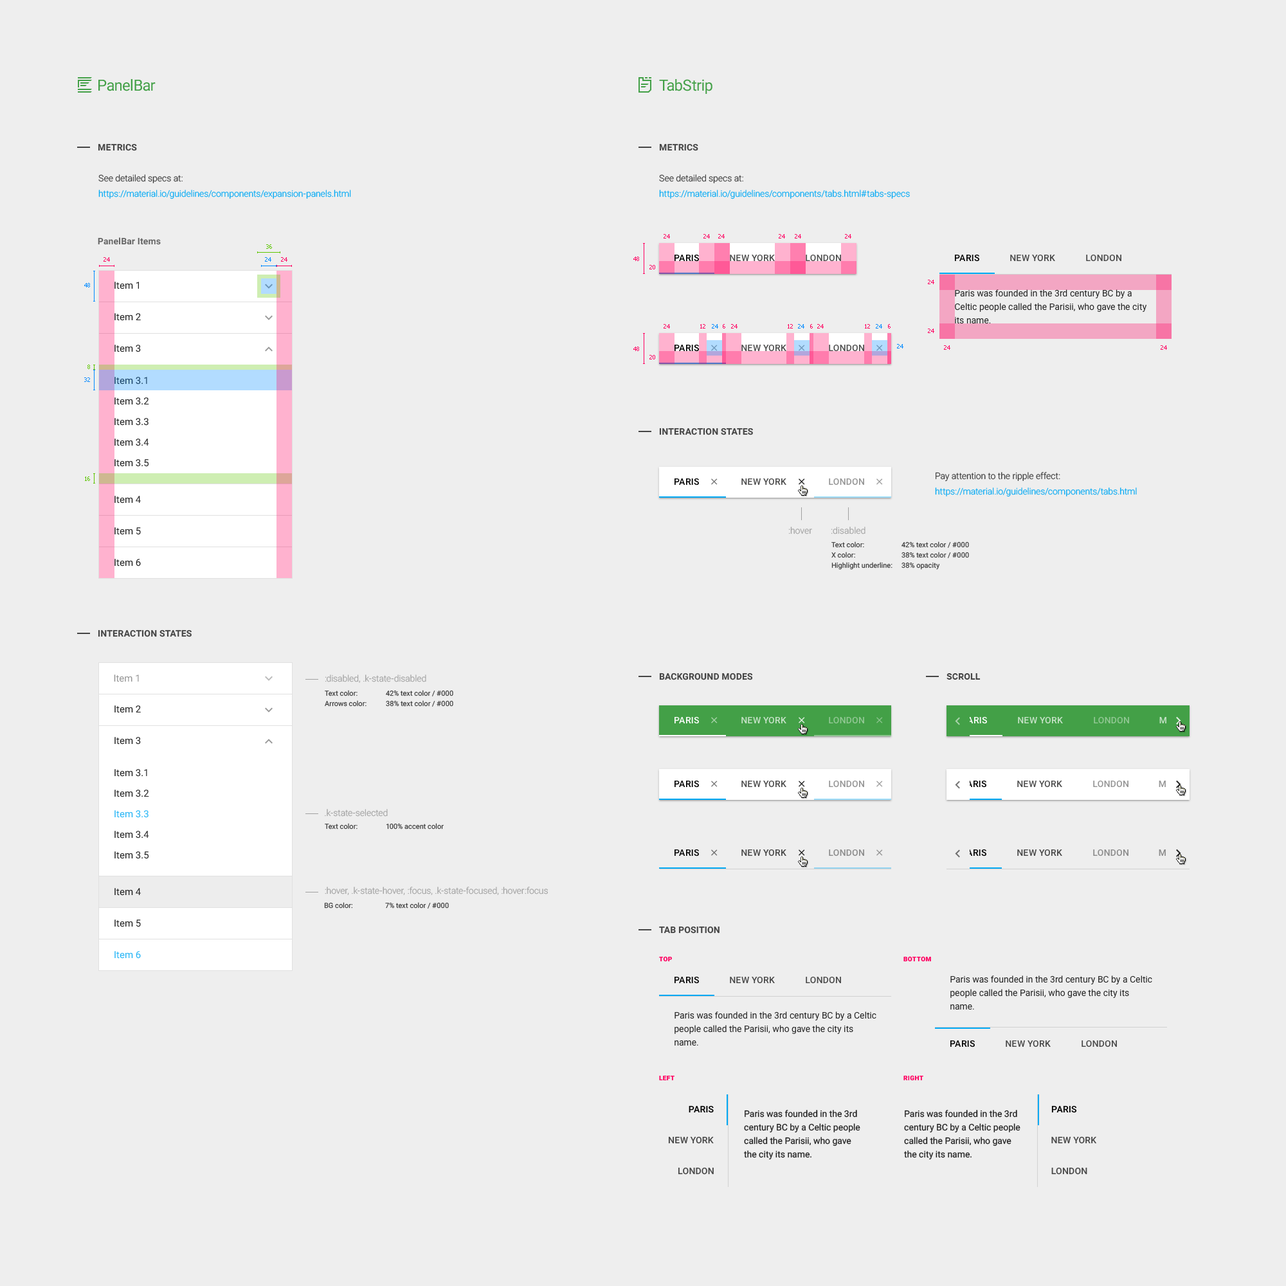
<style>
.page{position:relative;width:1286px;height:1286px;background:#eeeeee}
.page>*{position:absolute;margin:0}
.t1{font:15.4px "Roboto-Regular";letter-spacing:-0.025em;color:#43a047}
.t2{font:9px "Roboto-Bold";letter-spacing:0.01em;color:#454545;text-transform:uppercase}
.t3{font:9px/15.4px "Roboto-Light";color:#03a9f4}
.t4{font:9px/15.4px "Roboto-Light";color:#383838}
.t5{font:9px "Roboto-Bold";letter-spacing:0.01em;color:#656565}
.t6{font:5.8px "Tahoma";color:#5ec600}
.t7{font:5.8px "Tahoma";color:#ff0060}
.t8{font:5.8px "Tahoma";color:#008aff}
.t9{font:9px "Roboto-Medium";letter-spacing:0.01em;color:#000000}
.t10{font:9px "Roboto-Medium";letter-spacing:0.01em;color:#4c4c4c}
.t11{font:9px "Roboto-Medium";letter-spacing:0.01em;color:#474747}
.t12{font:9.6px/31.5px "Roboto-Regular";color:#212121}
.t13{font:9px/13.5px "Roboto-Regular";color:#1f1f1f}
.t14{font:9.6px/20.6px "Roboto-Regular";color:#212121}
.t15{font:9px "Roboto-Medium";letter-spacing:0.01em;color:#949494}
.t16{font:9px "Roboto-Light";color:#a1a1a1}
.t17{font:7.1px/10.3px "Roboto-Regular";color:#383838}
.t18{font:7.1px/46.3px "Roboto-Regular";color:#383838}
.t19{font:9.6px "Roboto-Regular";color:#949494}
.t20{font:9px "Roboto-Medium";letter-spacing:0.01em;color:#ffffff}
.t21{font:9px "Roboto-Medium";letter-spacing:0.01em;color:#c7e3c8}
.t22{font:9px "Roboto-Medium";letter-spacing:0.01em;color:#92c894}
.t23{font:7.1px "Roboto-Regular";color:#383838}
.t24{font:9px "Roboto-Medium";letter-spacing:0.01em;color:#8a8a8a}
.t25{font:9.6px/31.5px "Roboto-Regular"}
.t26{font:6.4px "Roboto-Black";letter-spacing:0.025em;color:#ff0060;text-transform:uppercase}
</style>
<div class="page">
<p class="t1" style="left:98px;top:79px;width:58px;height:12px">PanelBar</p>
<p class="t1" style="left:659px;top:79px;width:53px;height:15px">TabStrip</p>
<p class="t2" style="left:98px;top:143px;width:39px;height:8px">Metrics</p>
<p class="t2" style="left:659px;top:143px;width:39px;height:8px">Metrics</p>
<p class="t3" style="left:98px;top:174px;width:253px;height:25px"><span class="t4">See detailed specs at:<br></span>https://material.io/guidelines/components/expansion-panels.html</p>
<p class="t3" style="left:659px;top:174px;width:251px;height:25px"><span class="t4">See detailed specs at:<br></span>https://material.io/guidelines/components/tabs.html#tabs-specs</p>
<p class="t5" style="left:98px;top:237px;width:63px;height:8px">PanelBar Items</p>
<p class="t6" style="left:266px;top:244px;width:6px;height:5px">36</p>
<p class="t7" style="left:663px;top:234px;width:7px;height:5px">24</p>
<p class="t7" style="left:703px;top:234px;width:7px;height:5px">24</p>
<p class="t7" style="left:718px;top:234px;width:6px;height:5px">24</p>
<p class="t7" style="left:779px;top:234px;width:6px;height:5px">24</p>
<p class="t7" style="left:795px;top:234px;width:6px;height:5px">24</p>
<p class="t7" style="left:845px;top:234px;width:6px;height:5px">24</p>
<p class="t7" style="left:104px;top:257px;width:6px;height:5px">24</p>
<p class="t8" style="left:265px;top:257px;width:6px;height:5px">24</p>
<p class="t7" style="left:281px;top:257px;width:6px;height:5px">24</p>
<p class="t7" style="left:633px;top:256px;width:6px;height:5px">48</p>
<p class="t9" style="left:674px;top:254px;width:25px;height:8px">PARIS</p>
<p class="t10" style="left:730px;top:255px;width:45px;height:7px">NEW YORK</p>
<p class="t10" style="left:806px;top:254px;width:35px;height:8px">LONDON</p>
<p class="t9" style="left:955px;top:254px;width:24px;height:8px">PARIS</p>
<p class="t11" style="left:1010px;top:255px;width:45px;height:7px">NEW YORK</p>
<p class="t11" style="left:1086px;top:254px;width:35px;height:8px">LONDON</p>
<p class="t7" style="left:649px;top:265px;width:6px;height:4px">20</p>
<p class="t12" style="left:114px;top:282px;width:27px;height:70px">Item 1<br>Item 2<br>Item 3</p>
<p class="t7" style="left:928px;top:280px;width:6px;height:4px">24</p>
<p class="t8" style="left:84px;top:283px;width:6px;height:4px">48</p>
<p class="t13" style="left:955px;top:289px;width:191px;height:35px">Paris was founded in the 3rd century BC by a Celtic people called the Parisii, who gave the city its name.</p>
<p class="t7" style="left:663px;top:324px;width:7px;height:4px">24</p>
<p class="t7" style="left:700px;top:324px;width:5px;height:4px">12</p>
<p class="t8" style="left:712px;top:324px;width:6px;height:4px">24</p>
<p class="t7" style="left:723px;top:324px;width:2px;height:4px">6</p>
<p class="t7" style="left:731px;top:324px;width:6px;height:4px">24</p>
<p class="t7" style="left:788px;top:324px;width:5px;height:4px">12</p>
<p class="t8" style="left:798px;top:324px;width:6px;height:4px">24</p>
<p class="t7" style="left:810px;top:324px;width:3px;height:4px">6</p>
<p class="t7" style="left:817px;top:324px;width:7px;height:4px">24</p>
<p class="t7" style="left:865px;top:324px;width:5px;height:4px">12</p>
<p class="t8" style="left:876px;top:324px;width:6px;height:4px">24</p>
<p class="t7" style="left:888px;top:324px;width:2px;height:4px">6</p>
<p class="t7" style="left:928px;top:328px;width:6px;height:5px">24</p>
<p class="t7" style="left:633px;top:346px;width:6px;height:5px">48</p>
<p class="t9" style="left:674px;top:344px;width:25px;height:8px">PARIS</p>
<p class="t10" style="left:741px;top:345px;width:45px;height:7px">NEW YORK</p>
<p class="t10" style="left:829px;top:344px;width:35px;height:8px">LONDON</p>
<p class="t8" style="left:897px;top:344px;width:6px;height:4px">24</p>
<p class="t7" style="left:944px;top:345px;width:6px;height:5px">24</p>
<p class="t7" style="left:1160px;top:345px;width:7px;height:5px">24</p>
<p class="t6" style="left:87px;top:364px;width:3px;height:5px">8</p>
<p class="t7" style="left:649px;top:355px;width:6px;height:4px">20</p>
<p class="t8" style="left:84px;top:377px;width:6px;height:5px">32</p>
<p class="t14" style="left:114px;top:377px;width:35px;height:90px">Item 3.1<br>Item 3.2<br>Item 3.3<br>Item 3.4<br>Item 3.5</p>
<p class="t2" style="left:659px;top:428px;width:94px;height:7px">Interaction States</p>
<p class="t3" style="left:935px;top:472px;width:202px;height:25px"><span class="t4">Pay attention to the ripple effect:<br></span>https://material.io/guidelines/components/tabs.html</p>
<p class="t6" style="left:85px;top:476px;width:5px;height:5px">16</p>
<p class="t9" style="left:674px;top:478px;width:25px;height:7px">PARIS</p>
<p class="t10" style="left:741px;top:478px;width:45px;height:7px">NEW YORK</p>
<p class="t15" style="left:829px;top:478px;width:35px;height:7px">LONDON</p>
<p class="t12" style="left:114px;top:496px;width:27px;height:70px">Item 4<br>Item 5<br>Item 6</p>
<p class="t16" style="left:788px;top:526px;width:24px;height:8px">:hover</p>
<p class="t16" style="left:831px;top:526px;width:34px;height:8px">:disabled</p>
<p class="t17" style="left:831px;top:541px;width:61px;height:29px"><span class="t18">Text color:</span><br>X color:<br>Highlight underline:</p>
<p class="t17" style="left:901px;top:541px;width:68px;height:29px"><span class="t18">42% text color / #000<br></span>38% text color / #000<br>38% opacity</p>
<p class="t2" style="left:98px;top:629px;width:94px;height:8px">Interaction States</p>
<p class="t19" style="left:114px;top:674px;width:25px;height:8px">Item 1</p>
<p class="t16" style="left:325px;top:674px;width:101px;height:9px">:disabled, .k-state-disabled</p>
<p class="t2" style="left:659px;top:672px;width:94px;height:8px">Background Modes</p>
<p class="t2" style="left:946px;top:673px;width:34px;height:7px">Scroll</p>
<p class="t17" style="left:325px;top:690px;width:41px;height:16px"><span class="t18">Text color:</span><br>Arrows color:</p>
<p class="t18" style="left:386px;top:690px;width:67px;height:16px">42% text color / #000<br><span class="t17">38% text color / #000</span></p>
<p class="t12" style="left:114px;top:705px;width:27px;height:39px">Item 2<br>Item 3</p>
<p class="t20" style="left:674px;top:716px;width:25px;height:8px">PARIS</p>
<p class="t21" style="left:741px;top:717px;width:45px;height:7px">NEW YORK</p>
<p class="t22" style="left:829px;top:716px;width:35px;height:8px">LONDON</p>
<p class="t20" style="left:962px;top:716px;width:25px;height:8px">PARIS</p>
<p class="t21" style="left:1018px;top:717px;width:45px;height:7px">NEW YORK</p>
<p class="t22" style="left:1094px;top:716px;width:35px;height:8px">LONDON</p>
<p class="t14" style="left:114px;top:769px;width:35px;height:90px">Item 3.1<br>Item 3.2<br>Item 3.3<br>Item 3.4<br>Item 3.5</p>
<p class="t9" style="left:674px;top:780px;width:25px;height:8px">PARIS</p>
<p class="t10" style="left:741px;top:780px;width:45px;height:8px">NEW YORK</p>
<p class="t15" style="left:829px;top:780px;width:35px;height:8px">LONDON</p>
<p class="t9" style="left:962px;top:780px;width:24px;height:8px">PARIS</p>
<p class="t10" style="left:1017px;top:780px;width:45px;height:8px">NEW YORK</p>
<p class="t15" style="left:1093px;top:780px;width:35px;height:8px">LONDON</p>
<p class="t16" style="left:325px;top:809px;width:63px;height:7px">.k-state-selected</p>
<p class="t23" style="left:325px;top:823px;width:32px;height:6px">Text color:</p>
<p class="t23" style="left:386px;top:823px;width:58px;height:6px">100% accent color</p>
<p class="t9" style="left:674px;top:849px;width:25px;height:7px">PARIS</p>
<p class="t11" style="left:741px;top:849px;width:45px;height:7px">NEW YORK</p>
<p class="t24" style="left:829px;top:849px;width:35px;height:7px">LONDON</p>
<p class="t9" style="left:962px;top:849px;width:24px;height:7px">PARIS</p>
<p class="t11" style="left:1017px;top:849px;width:45px;height:7px">NEW YORK</p>
<p class="t24" style="left:1093px;top:849px;width:35px;height:7px">LONDON</p>
<p class="t25" style="left:114px;top:888px;width:27px;height:71px">Item 4<br>Item 5<br>Item 6</p>
<p class="t16" style="left:325px;top:887px;width:223px;height:8px">:hover, .k-state-hover, :focus, .k-state-focused, :hover:focus</p>
<p class="t23" style="left:324px;top:902px;width:29px;height:6px">BG color:</p>
<p class="t23" style="left:385px;top:902px;width:64px;height:6px">7% text color / #000</p>
<p class="t2" style="left:659px;top:926px;width:60px;height:7px">Tab Position</p>
<p class="t26" style="left:659px;top:956px;width:13px;height:6px">Top</p>
<p class="t26" style="left:903px;top:956px;width:28px;height:6px">Bottom</p>
<p class="t9" style="left:674px;top:976px;width:25px;height:8px">PARIS</p>
<p class="t11" style="left:730px;top:977px;width:45px;height:7px">NEW YORK</p>
<p class="t11" style="left:806px;top:976px;width:35px;height:8px">LONDON</p>
<p class="t13" style="left:950px;top:975px;width:202px;height:35px">Paris was founded in the 3rd century BC by a Celtic people called the Parisii, who gave the city its name.</p>
<p class="t13" style="left:674px;top:1011px;width:202px;height:35px">Paris was founded in the 3rd century BC by a Celtic people called the Parisii, who gave the city its name.</p>
<p class="t9" style="left:950px;top:1040px;width:25px;height:7px">PARIS</p>
<p class="t11" style="left:1005px;top:1040px;width:45px;height:7px">NEW YORK</p>
<p class="t11" style="left:1081px;top:1040px;width:36px;height:7px">LONDON</p>
<p class="t26" style="left:659px;top:1075px;width:15px;height:6px">Left</p>
<p class="t26" style="left:903px;top:1075px;width:20px;height:6px">Right</p>
<p class="t9" style="left:688px;top:1105px;width:26px;height:8px">PARIS</p>
<p class="t13" style="left:744px;top:1110px;width:116px;height:50px">Paris was founded in the 3rd century BC by a Celtic people called the Parisii, who gave the city its name.</p>
<p class="t13" style="left:904px;top:1110px;width:116px;height:50px">Paris was founded in the 3rd century BC by a Celtic people called the Parisii, who gave the city its name.</p>
<p class="t9" style="left:1051px;top:1105px;width:26px;height:8px">PARIS</p>
<p class="t11" style="left:668px;top:1136px;width:46px;height:8px">NEW YORK</p>
<p class="t11" style="left:1051px;top:1136px;width:45px;height:8px">NEW YORK</p>
<p class="t11" style="left:678px;top:1167px;width:36px;height:7px">LONDON</p>
<p class="t11" style="left:1051px;top:1167px;width:36px;height:7px">LONDON</p>
</div>
